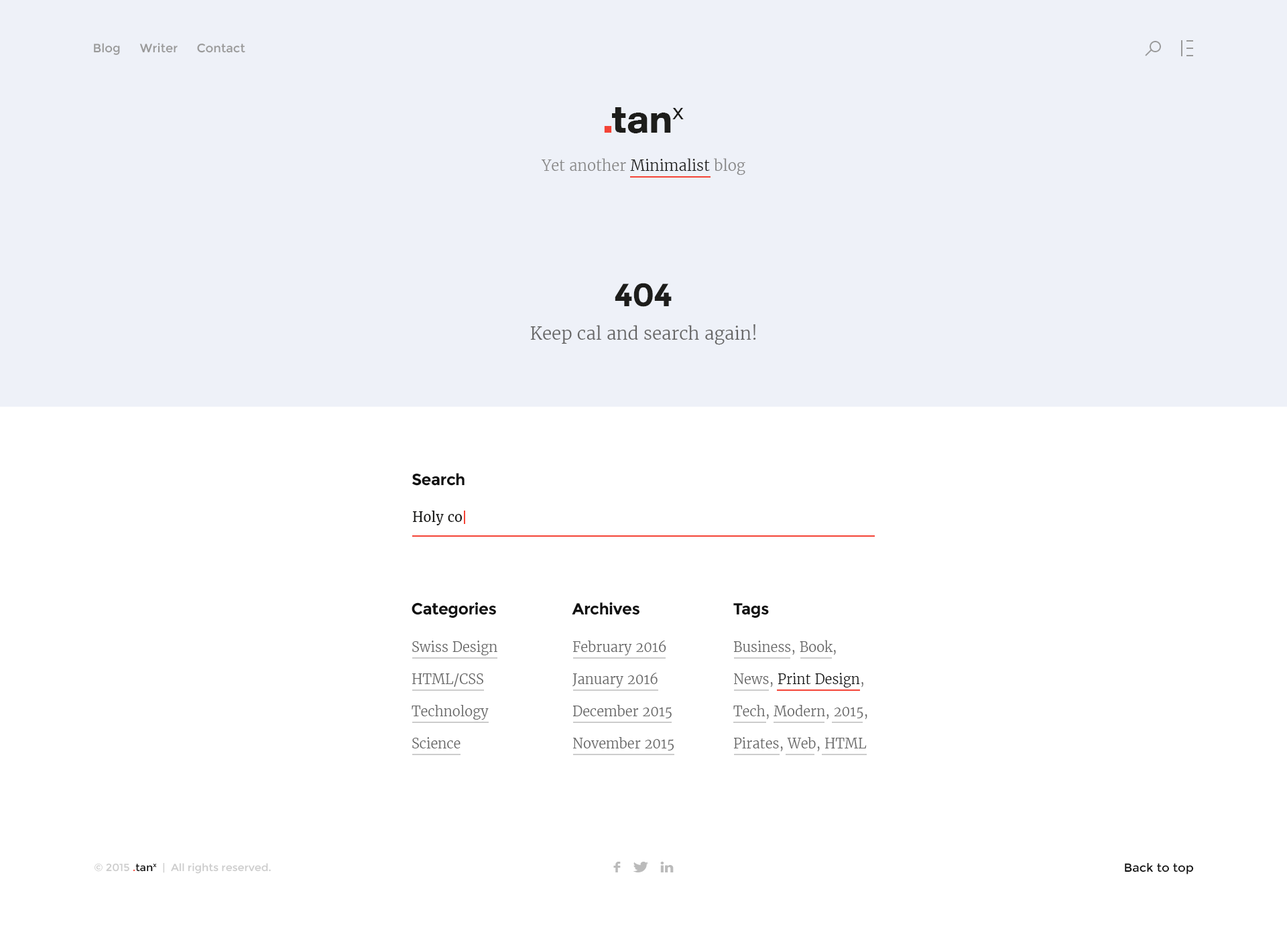
<style>
.page{position:relative;width:1287px;height:926px;background:#ffffff}
.page>*{position:absolute;margin:0}
.t1{font:12.1px "Montserrat-Regular";color:#999999}
.t2{font:14.7px "MerriweatherLight";color:#888888}
.t3{font:14.7px "MerriweatherLight";color:#1d1d1b}
.t4{font:32.2px "Montserrat-Bold";letter-spacing:-0.025em;color:#1d1d1b}
.t5{font:17.5px "MerriweatherLight";color:#666666}
.t6{font:16.1px "Montserrat-Bold";letter-spacing:-0.025em;color:#111111}
.t7{font:13.4px "Merriweather-Regular";color:#1d1d1b}
.t8{font:13.4px/32.2px "MerriweatherLight";color:#666666}
.t9{font:13.4px/32.2px "MerriweatherLight";color:#111111}
.t10{font:10.4px "Montserrat-Regular";color:#cccccc}
.t11{font:10.4px "Montserrat-Regular";color:#f44336}
.t12{font:10.4px "Montserrat-Regular";color:#111111}
.t13{font:11.8px "Zocial-Regular";color:#bbbbbb;scale:1.03 1}
.t14{font:11.8px "Montserrat-Regular";color:#111111}
</style>
<div class="page">
<p class="t1" style="left:94px;top:43px;width:26px;height:12px">Blog</p>
<p class="t1" style="left:139px;top:43px;width:39px;height:10px">Writer</p>
<p class="t1" style="left:197px;top:44px;width:48px;height:9px">Contact</p>
<p class="t2" style="left:541px;top:158px;width:204px;height:17px">Yet another <span class="t3">Minimalist</span> blog</p>
<p class="t4" style="left:615px;top:283px;width:57px;height:24px">404</p>
<p class="t5" style="left:530px;top:324px;width:226px;height:21px">Keep cal and search again!</p>
<p class="t6" style="left:412px;top:473px;width:53px;height:13px">Search</p>
<p class="t7" style="left:413px;top:511px;width:50px;height:15px">Holy co</p>
<p class="t6" style="left:412px;top:602px;width:84px;height:16px">Categories</p>
<p class="t6" style="left:572px;top:602px;width:68px;height:13px">Archives</p>
<p class="t6" style="left:733px;top:603px;width:36px;height:15px">Tags</p>
<p class="t8" style="left:412px;top:641px;width:85px;height:108px">Swiss Design<br>HTML/CSS<br>Technology<br>Science</p>
<p class="t8" style="left:572px;top:641px;width:102px;height:110px">February 2016<br>January 2016<br>December 2015<br>November 2015</p>
<p class="t8" style="left:733px;top:640px;width:134px;height:112px">Business, Book, News, <span class="t9">Print Design</span>,<br>Tech, Modern, 2015, Pirates, Web, HTML</p>
<p class="t10" style="left:95px;top:863px;width:176px;height:11px">© 2015 <span class="t11">.</span><span class="t12">tanx</span>  |  All rights reserved.</p>
<p class="t13" style="left:613px;top:862px;width:8px;height:11px">f</p>
<p class="t13" style="left:633px;top:862px;width:15px;height:11px">T</p>
<p class="t13" style="left:660px;top:862px;width:14px;height:11px">L</p>
<p class="t14" style="left:1125px;top:863px;width:69px;height:12px">Back to top</p>
</div>
